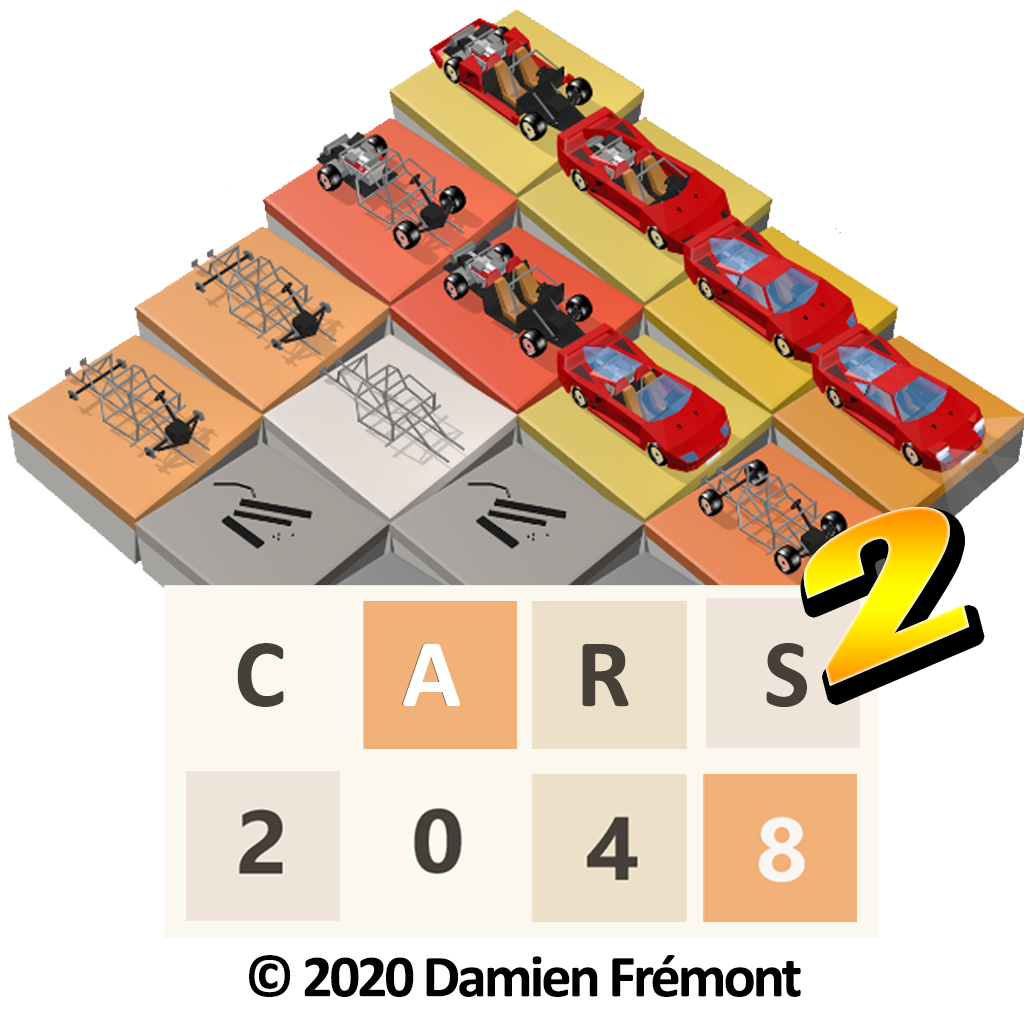
<style>
.page{position:relative;width:1024px;height:1024px;background:#ffffff}
.page>*{position:absolute;margin:0}
.t1{font:173.2px "Impact";letter-spacing:-0.05em;scale:2.01 1}
.t2{font:97.7px "Calibri-Bold";letter-spacing:-0.05em;color:#464039}
.t3{font:97.7px "Calibri-Bold";letter-spacing:-0.05em;color:#ffffff}
.t4{font:60px "Calibri-Bold";letter-spacing:-0.05em;color:#000000}
</style>
<div class="page">
<p class="t1" style="left:803px;top:507px;width:167px;height:179px;rotate:-23deg">2</p>
<p class="t2" style="left:237px;top:643px;width:570px;height:64px">C       A       R        S</p>
<p class="t3" style="left:403px;top:643px;width:57px;height:64px">A</p>
<p class="t4" style="left:249px;top:955px;width:552px;height:42px">© 2020 Damien Frémont</p>
</div>
